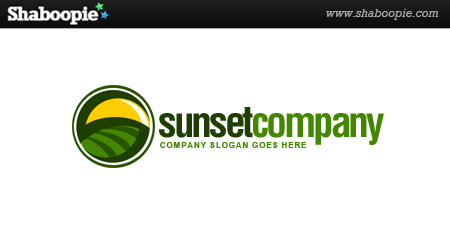
<style>
.page{position:relative;width:450px;height:250px;background:#ffffff}
.page>*{position:absolute;margin:0}
.t1{font:41.7px "Helvetica-Condensed-Bold";letter-spacing:-0.075em;color:#438700}
.t2{font:41.7px "Helvetica-Condensed-Bold";letter-spacing:-0.075em;color:#1f3f00}
.t3{font:8.3px "Arial-BoldMT";letter-spacing:0.075em;color:#438700}
</style>
<div class="page">
<p class="t1" style="left:159px;top:107px;width:225px;height:38px"><span class="t2">sunset</span>company</p>
<p class="t3" style="left:160px;top:142px;width:147px;height:6px">COMPANY SLOGAN GOES HERE</p>
</div>
